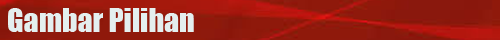
<style>
.page{position:relative;width:500px;height:40px}
.page>*{position:absolute;margin:0}
.t1{font:30px "Impact";color:#e4efef}
</style>
<div class="page">
<p class="t1" style="left:8px;top:8px;width:186px;height:24px">Gambar Pilihan</p>
</div>
